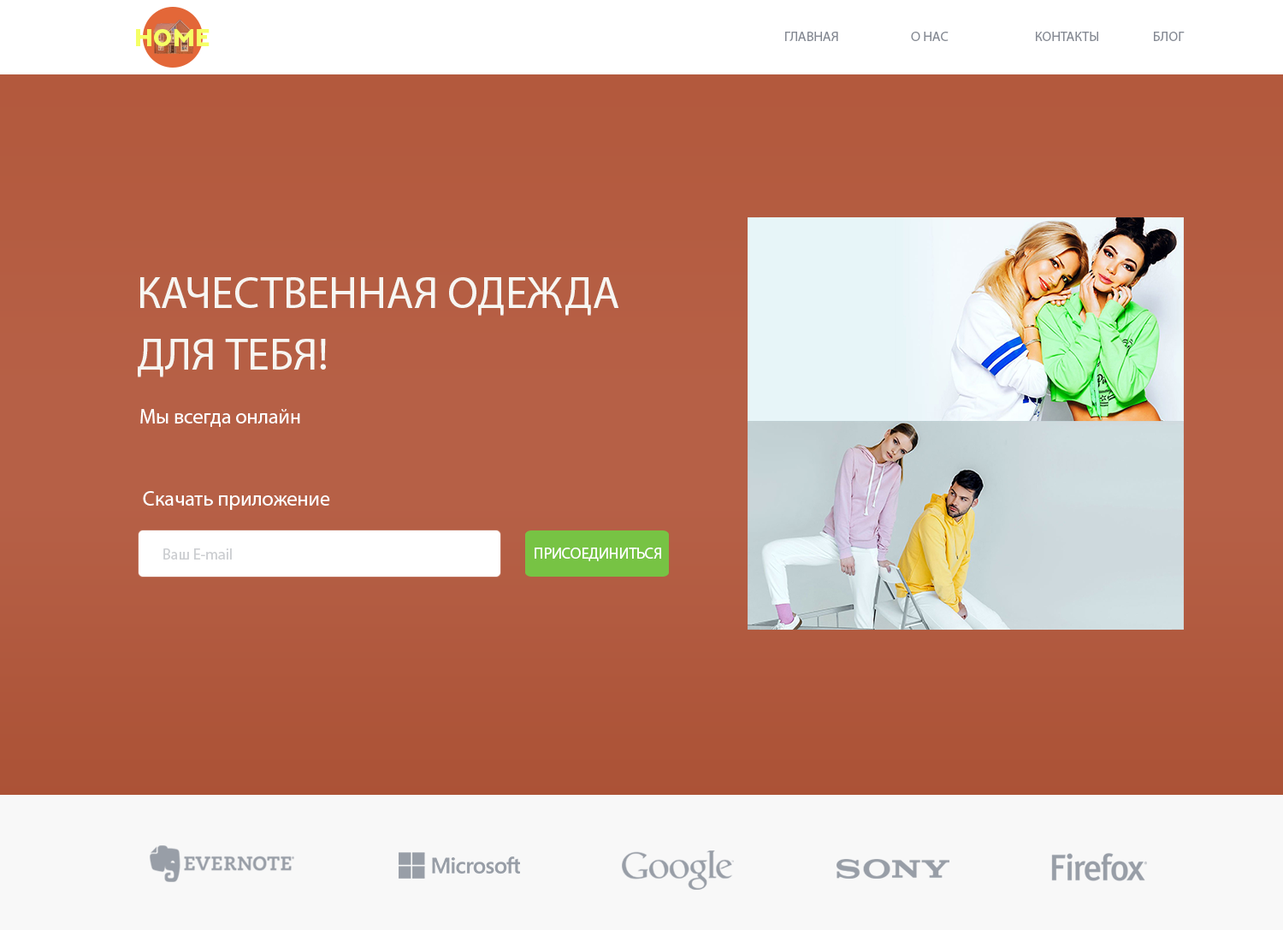
<style>
.page{position:relative;width:1283px;height:930px}
.page>*{position:absolute;margin:0}
.t1{font:24px "NEXTART-Heavy";letter-spacing:0.03em;color:#f5ff65}
.t2{font:13.7px "MyriadPro-Regular";color:#858a94;text-transform:uppercase}
.t3{font:44.5px/61.6px "MyriadPro-Regular";color:#f7f6f2;text-transform:uppercase}
.t4{font:20.5px "MyriadPro-Regular";color:#ffffff}
.t5{font:15.4px "MyriadPro-Regular";color:#ccced1}
.t6{font:15.4px "MyriadPro-Regular";color:#ffffff}
</style>
<div class="page">
<p class="t1" style="left:136px;top:29px;width:74px;height:17px">HOME</p>
<p class="t2" style="left:785px;top:32px;width:53px;height:9px">ГЛАВНАЯ</p>
<p class="t2" style="left:911px;top:32px;width:37px;height:9px">О НАС</p>
<p class="t2" style="left:1036px;top:32px;width:62px;height:9px">КОНТАКТЫ</p>
<p class="t2" style="left:1154px;top:32px;width:30px;height:9px">БЛОГ</p>
<p class="t3" style="left:137px;top:277px;width:482px;height:100px">КАЧЕСТВЕННАЯ ОДЕЖДА<br>ДЛЯ ТЕБЯ!</p>
<p class="t4" style="left:140px;top:409px;width:160px;height:18px">Мы всегда онлайн</p>
<p class="t4" style="left:143px;top:491px;width:187px;height:19px">Скачать приложение</p>
<p class="t5" style="left:163px;top:548px;width:69px;height:11px">Ваш E-mail</p>
<p class="t6" style="left:534px;top:547px;width:127px;height:14px">ПРИСОЕДИНИТЬСЯ</p>
</div>
